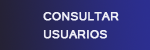
<style>
.page{position:relative;width:150px;height:50px}
.page>*{position:absolute;margin:0}
.t1{font:15px "Tunga";color:#eeeef7;font-weight:bold}
</style>
<div class="page">
<p class="t1" style="left:43px;top:12px;width:76px;height:27px">CONSULTAR<br>USUARIOS</p>
</div>
